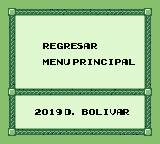
<style>
.page{position:relative;width:160px;height:144px;background:#e0f8cf}
.page>*{position:absolute;margin:0}
.t1{font:8px "Early-GameBoy";letter-spacing:-0.14em;color:#000000}
</style>
<div class="page">
<p class="t1" style="left:43px;top:43px;width:54px;height:6px">REGRESAR</p>
<p class="t1" style="left:43px;top:43px;width:54px;height:6px">REGRESAR</p>
<p class="t1" style="left:43px;top:59px;width:92px;height:6px">MENU PRINCIPAL</p>
<p class="t1" style="left:35px;top:109px;width:94px;height:6px">2019 D. BOLIVAR</p>
</div>
